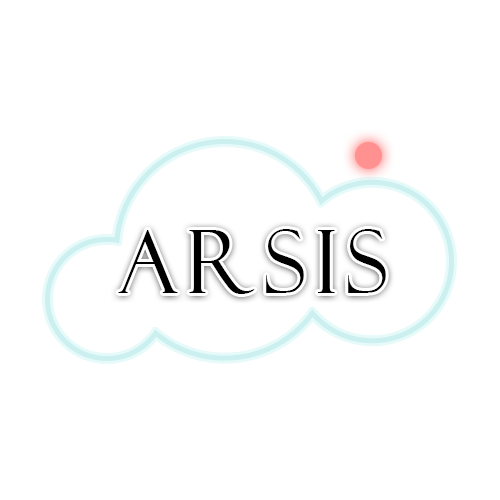
<style>
.page{position:relative;width:500px;height:500px;background:#ffffff}
.page>*{position:absolute;margin:0}
.t1{font:87.1px "FelixTitlingMT";letter-spacing:0.1em;color:#000000}
</style>
<div class="page">
<p class="t1" style="left:118px;top:229px;width:268px;height:65px">ARSIS</p>
</div>
